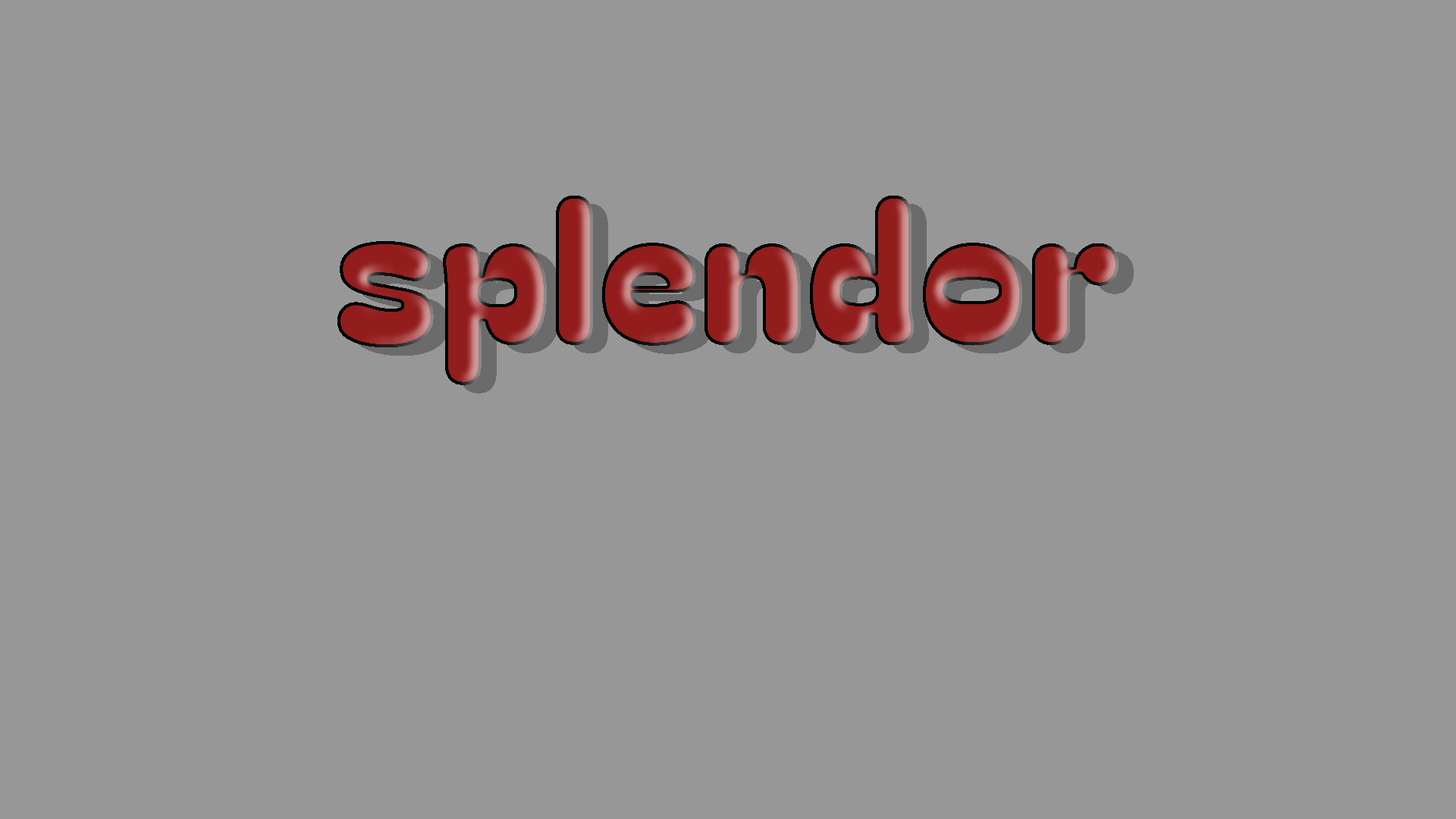
<style>
.page{position:relative;width:1456px;height:819px;background:#979797}
.page>*{position:absolute;margin:0}
.t1{font:194.1px "BagelFatOne-Regular"}
</style>
<div class="page">
<p class="t1" style="left:337px;top:196px;width:782px;height:189px">splendor</p>
<p class="t1" style="left:353px;top:204px;width:781px;height:190px">splendor</p>
</div>
